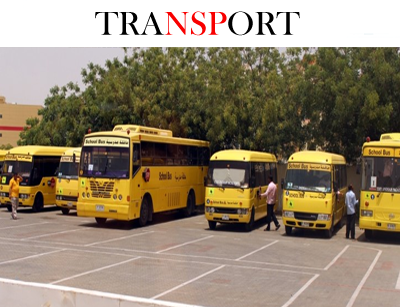
<style>
.page{position:relative;width:400px;height:307px}
.page>*{position:absolute;margin:0}
.t1{font:34px "BaskOldFace";color:#000000;text-transform:uppercase}
.t2{font:34px "BaskOldFace";color:#f80000;text-transform:uppercase}
</style>
<div class="page">
<p class="t1" style="left:95px;top:11px;width:205px;height:25px">Tra<span class="t2">nsp</span>ort</p>
</div>
